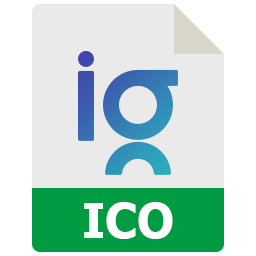
<style>
.page{position:relative;width:256px;height:256px;background:#eaeaea}
.page>*{position:absolute;margin:0}
.t1{font:48px "Tahoma-Bold";color:#ffffff}
</style>
<div class="page">
<p class="t1" style="left:84px;top:202px;width:89px;height:37px">ICO</p>
</div>
